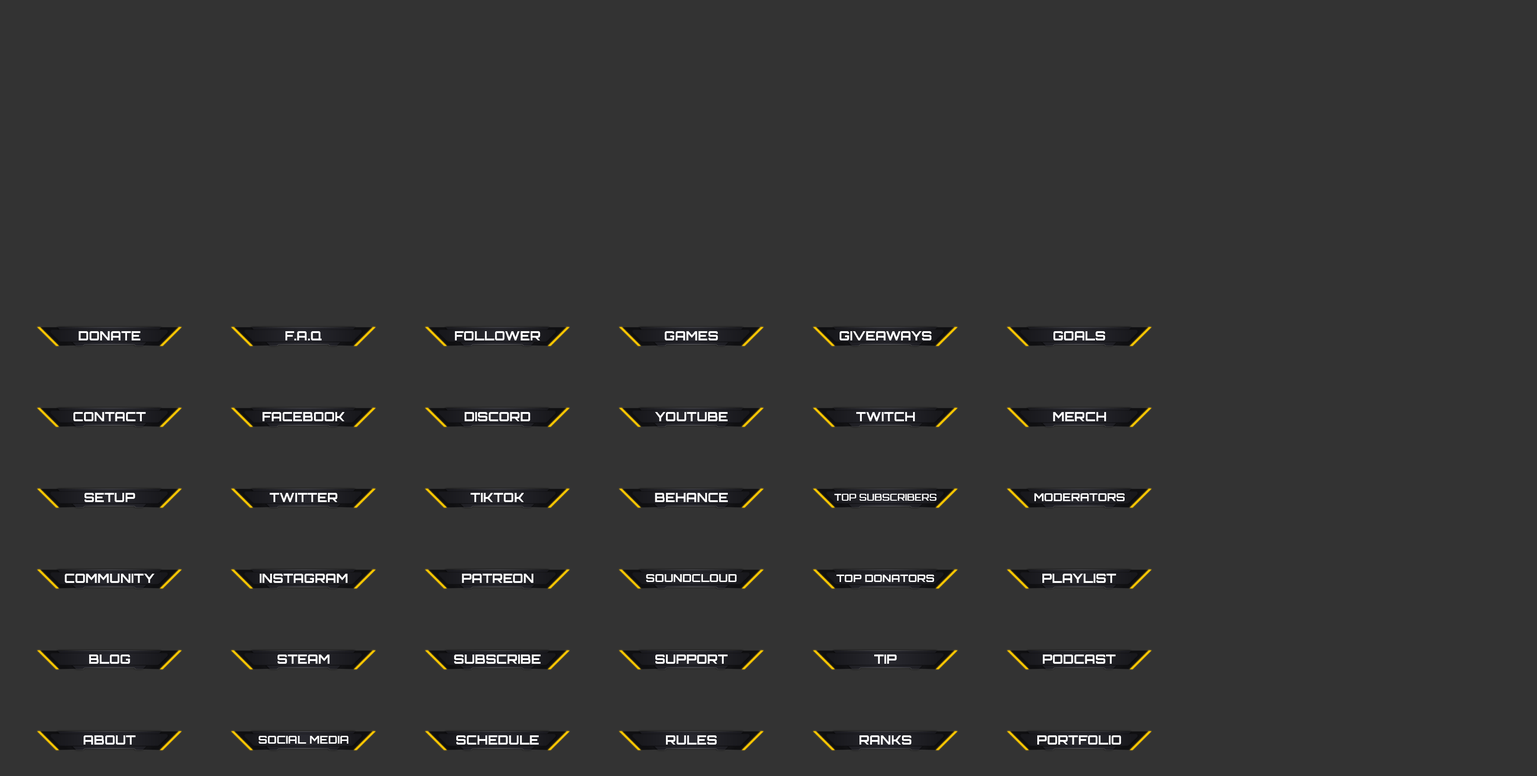
<style>
.page{position:relative;width:1537px;height:776px;background:#333333}
.page>*{position:absolute;margin:0}
.t1{font:12.9px "Orbitron-Bold";color:#ffffff}
.t2{font:9.2px "Orbitron-Bold";color:#ffffff}
.t3{font:11.1px "Orbitron-Bold";color:#ffffff}
.t4{font:10.6px "Orbitron-Bold";color:#ffffff}
</style>
<div class="page">
<p class="t1" style="left:79px;top:331px;width:61px;height:9px">DONATE</p>
<p class="t1" style="left:285px;top:331px;width:37px;height:9px">F.A.Q</p>
<p class="t1" style="left:455px;top:331px;width:85px;height:9px">FOLLOWER</p>
<p class="t1" style="left:665px;top:331px;width:53px;height:9px">GAMES</p>
<p class="t1" style="left:840px;top:331px;width:91px;height:9px">GIVEAWAYS</p>
<p class="t1" style="left:1053px;top:331px;width:52px;height:9px">GOALS</p>
<p class="t1" style="left:73px;top:412px;width:73px;height:9px">CONTACT</p>
<p class="t1" style="left:262px;top:412px;width:83px;height:9px">FACEBOOK</p>
<p class="t1" style="left:465px;top:412px;width:65px;height:9px">DISCORD</p>
<p class="t1" style="left:655px;top:412px;width:73px;height:9px">YOUTUBE</p>
<p class="t1" style="left:856px;top:412px;width:59px;height:9px">TWITCH</p>
<p class="t1" style="left:1053px;top:412px;width:53px;height:9px">MERCH</p>
<p class="t1" style="left:85px;top:493px;width:50px;height:9px">SETUP</p>
<p class="t1" style="left:270px;top:493px;width:68px;height:9px">TWITTER</p>
<p class="t1" style="left:471px;top:493px;width:53px;height:9px">TIKTOK</p>
<p class="t1" style="left:655px;top:493px;width:73px;height:9px">BEHANCE</p>
<p class="t2" style="left:834px;top:494px;width:103px;height:7px">TOP SUBSCRIBERS</p>
<p class="t3" style="left:1034px;top:493px;width:91px;height:8px">MODERATORS</p>
<p class="t1" style="left:65px;top:574px;width:90px;height:9px">COMMUNITY</p>
<p class="t1" style="left:260px;top:574px;width:88px;height:9px">INSTAGRAM</p>
<p class="t1" style="left:462px;top:574px;width:71px;height:9px">PATREON</p>
<p class="t3" style="left:646px;top:574px;width:91px;height:8px">SOUNDCLOUD</p>
<p class="t4" style="left:836px;top:575px;width:98px;height:7px">TOP DONATORS</p>
<p class="t1" style="left:1042px;top:574px;width:74px;height:9px">PLAYLIST</p>
<p class="t1" style="left:89px;top:654px;width:41px;height:10px">BLOG</p>
<p class="t1" style="left:278px;top:654px;width:52px;height:10px">STEAM</p>
<p class="t1" style="left:454px;top:654px;width:87px;height:10px">SUBSCRIBE</p>
<p class="t1" style="left:655px;top:654px;width:73px;height:10px">SUPPORT</p>
<p class="t1" style="left:874px;top:654px;width:23px;height:10px">TIP</p>
<p class="t1" style="left:1043px;top:654px;width:73px;height:10px">PODCAST</p>
<p class="t1" style="left:84px;top:735px;width:52px;height:9px">ABOUT</p>
<p class="t3" style="left:259px;top:736px;width:90px;height:8px">SOCIAL MEDIA</p>
<p class="t1" style="left:456px;top:735px;width:83px;height:9px">SCHEDULE</p>
<p class="t1" style="left:666px;top:735px;width:51px;height:9px">RULES</p>
<p class="t1" style="left:859px;top:735px;width:53px;height:9px">RANKS</p>
<p class="t1" style="left:1037px;top:735px;width:84px;height:9px">PORTFOLIO</p>
</div>
